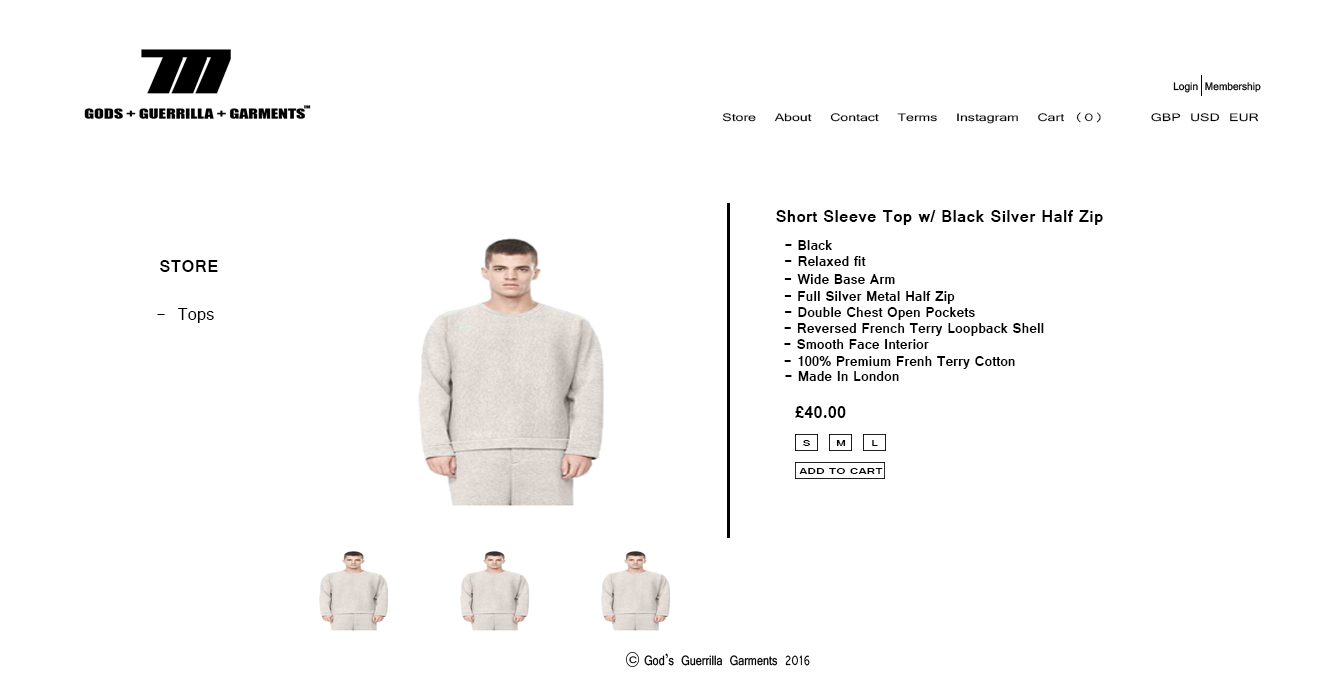
<style>
.page{position:relative;width:1332px;height:683px;background:#ffffff}
.page>*{position:absolute;margin:0}
.t1{font:11.7px "Vrinda";color:#000000;scale:1.35 1}
.t2{font:18.5px "Vrinda-Bold";color:#000000}
.t3{font:14.8px "Vrinda-Bold";color:#000000}
.t4{font:18.5px "Vrinda";color:#000000}
.t5{font:9.9px "Vrinda-Bold";color:#000000;scale:1.31 1}
</style>
<div class="page">
<p class="t1" style="left:722px;top:112px;width:537px;height:12px">Store  About  Contact  Terms  Instagram  Cart (0)     GBP USD EUR</p>
<p class="t2" style="left:776px;top:210px;width:327px;height:15px">Short Sleeve Top w/ Black Silver Half Zip</p>
<p class="t3" style="left:785px;top:240px;width:47px;height:10px"><span class="t2"><br> </span>- Black</p>
<p class="t3" style="left:785px;top:256px;width:81px;height:10px"><span class="t2"><br> </span>- Relaxed fit</p>
<p class="t2" style="left:160px;top:260px;width:58px;height:12px">STORE</p>
<p class="t3" style="left:784px;top:274px;width:111px;height:10px">- Wide Base Arm</p>
<p class="t3" style="left:784px;top:291px;width:171px;height:13px">- Full Silver Metal Half Zip</p>
<p class="t4" style="left:157px;top:308px;width:57px;height:15px">- Tops</p>
<p class="t3" style="left:785px;top:307px;width:190px;height:13px">- Double Chest Open Pockets</p>
<p class="t3" style="left:784px;top:323px;width:260px;height:13px">- Reversed French Terry Loopback Shell</p>
<p class="t3" style="left:784px;top:339px;width:145px;height:10px">- Smooth Face Interior</p>
<p class="t3" style="left:784px;top:356px;width:231px;height:13px">- 100% Premium Frenh Terry Cotton</p>
<p class="t3" style="left:785px;top:371px;width:114px;height:10px">- Made In London</p>
<p class="t2" style="left:795px;top:406px;width:51px;height:12px">£40.00</p>
<p class="t5" style="left:803px;top:440px;width:7px;height:6px">S</p>
<p class="t5" style="left:836px;top:440px;width:10px;height:6px">M</p>
<p class="t5" style="left:872px;top:440px;width:6px;height:6px">L</p>
<p class="t5" style="left:799px;top:468px;width:84px;height:6px">ADD TO CART</p>
</div>
